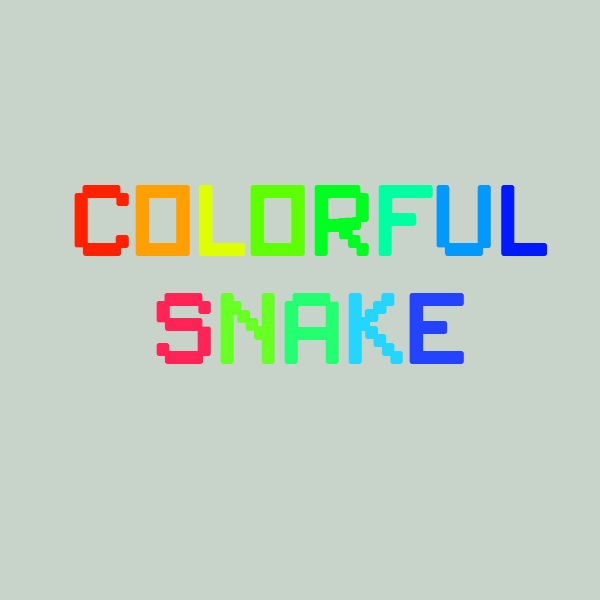
<style>
.page{position:relative;width:600px;height:600px;background:#c8d3ca}
.page>*{position:absolute;margin:0}
.t1{font:90px "PixelSplitter-Bold";color:#ff2100}
.t2{font:90px "PixelSplitter-Bold";color:#ffa000}
.t3{font:90px "PixelSplitter-Bold";color:#ddff00}
.t4{font:90px "PixelSplitter-Bold";color:#5eff00}
.t5{font:90px "PixelSplitter-Bold";color:#00ff21}
.t6{font:90px "PixelSplitter-Bold";color:#00ffa0}
.t7{font:90px "PixelSplitter-Bold";color:#0099fd}
.t8{font:90px "PixelSplitter-Bold";color:#001afd}
.t9{font:90px "PixelSplitter-Bold";color:#ff2455}
.t10{font:90px "PixelSplitter-Bold";color:#68ff24}
.t11{font:90px "PixelSplitter-Bold";color:#24ff72}
.t12{font:90px "PixelSplitter-Bold";color:#24d5ff}
.t13{font:90px "PixelSplitter-Bold";color:#2443ff}
</style>
<div class="page">
<p class="t1" style="left:74px;top:185px;width:474px;height:179px;text-align:center">C<span class="t2">o</span><span class="t3">l</span><span class="t4">o</span><span class="t5">r</span><span class="t6">f</span><span class="t7">u</span><span class="t8">l <br></span><span class="t9">S</span><span class="t10">n</span><span class="t11">a</span><span class="t12">k</span><span class="t13">e</span></p>
</div>
